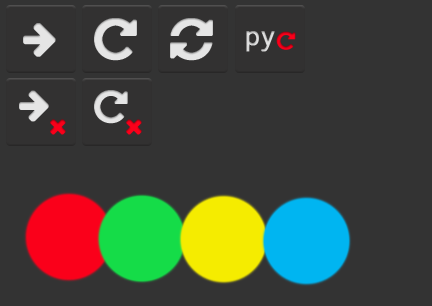
<style>
.page{position:relative;width:432px;height:306px;background:#333333}
.page>*{position:absolute;margin:0}
.t1{font:28.4px "AndaleMono";letter-spacing:-0.065em;color:#e5e5e5;font-weight:bold}
</style>
<div class="page">
<p class="t1" style="left:246px;top:31px;width:29px;height:21px">py</p>
</div>
